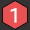
<style>
.page{position:relative;width:30px;height:30px;background:#eb5153}
.page>*{position:absolute;margin:0}
.t1{font:20px "Roboto-Regular";color:#ffffff}
</style>
<div class="page">
<p class="t1" style="left:10px;top:8px;width:7px;height:15px">1</p>
</div>
